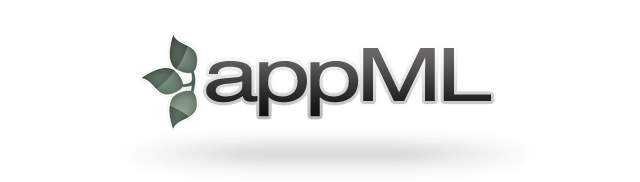
<style>
.page{position:relative;width:640px;height:182px;background:#ffffff}
.page>*{position:absolute;margin:0}
.t1{font:73.7px "Helvetica";letter-spacing:-0.06em;scale:1.4 1}
</style>
<div class="page">
<p class="t1" style="left:206px;top:48px;width:285px;height:69px">appML</p>
</div>
